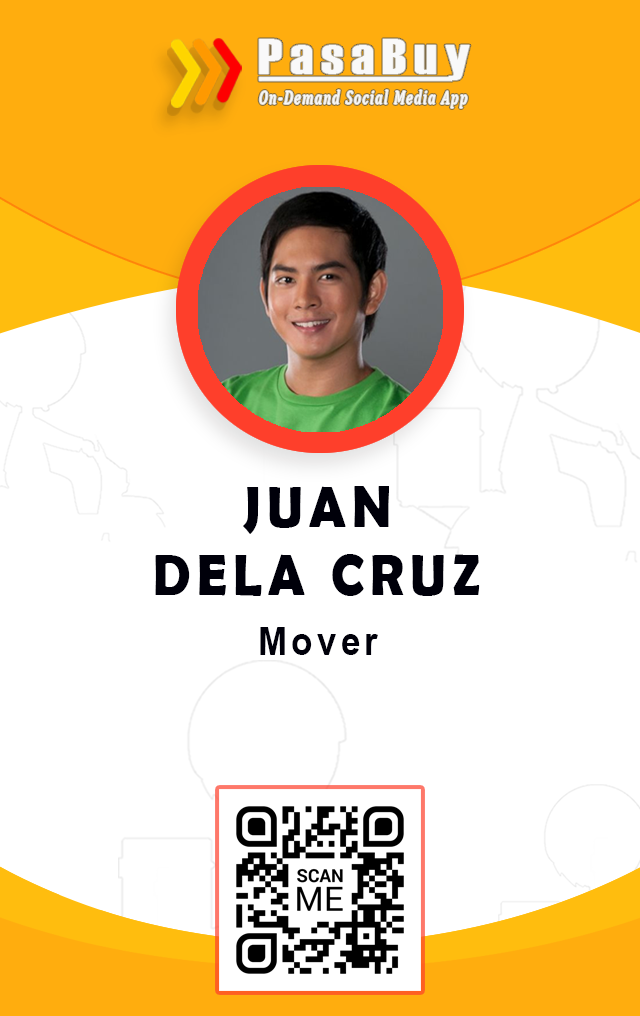
<style>
.page{position:relative;width:640px;height:1016px;background:#ffffff}
.page>*{position:absolute;margin:0}
.t1{font:50.3px "Haettenschweiler";letter-spacing:0.12em;color:#f9f9f9;scale:1.27 1}
.t2{font:20px "Cambria-Italic";letter-spacing:0.12em;color:#f9f9f9;scale:0.68 1}
.t3{font:58.1px "BerlinSansFBDemi-Bold";letter-spacing:0.12em;color:#00000a;scale:0.91 1}
.t4{font:38.5px "Arial-BoldMT";letter-spacing:0.12em;color:#00000a;scale:0.91 1}
</style>
<div class="page">
<p class="t1" style="left:259px;top:39px;width:211px;height:41px">PasaBuy</p>
<p class="t2" style="left:259px;top:90px;width:208px;height:18px">On-Demand Social Media App</p>
<p class="t3" style="left:243px;top:486px;width:146px;height:48px">JUAN</p>
<p class="t3" style="left:155px;top:554px;width:325px;height:42px">DELA CRUZ</p>
<p class="t4" style="left:260px;top:627px;width:118px;height:28px">Mover</p>
</div>
